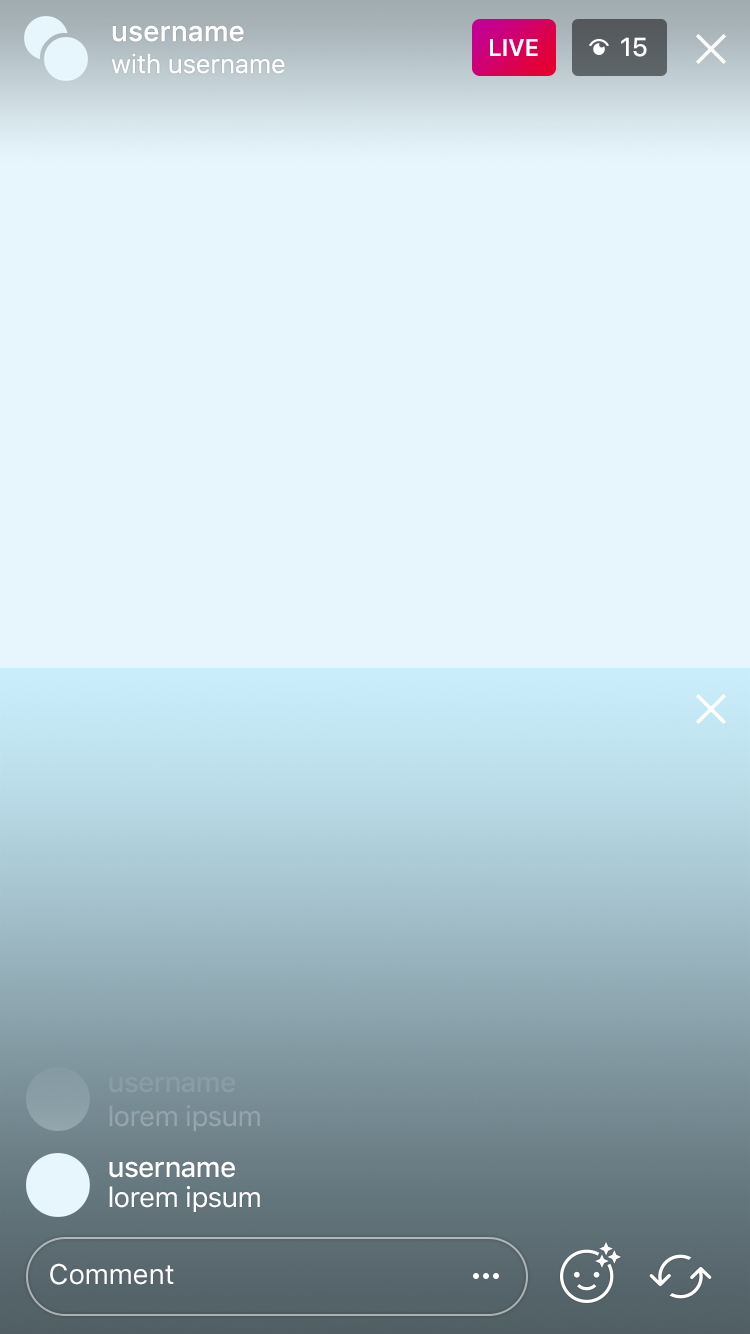
<style>
.page{position:relative;width:750px;height:1334px;background:#e6f6fc}
.page>*{position:absolute;margin:0}
.t1{font:28px "SFUIText-Medium";color:#ffffff}
.t2{font:24px "SFUIText-Semibold";letter-spacing:-0.025em;color:#ffffff}
.t3{font:26px "SFUIText-Medium";letter-spacing:-0.025em;color:#ffffff}
.t4{font:26px "SFUIText-Regular";letter-spacing:-0.015em;color:#ffffff}
.t5{font:28px "SFUIText-Medium";letter-spacing:-0.025em;color:#899da5}
.t6{font:28px "SFUIText-Regular";letter-spacing:-0.025em;color:#95a5ab}
.t7{font:28px "SFUIText-Medium";letter-spacing:-0.025em;color:#ffffff}
.t8{font:28px "SFUIText-Regular";letter-spacing:-0.025em;color:#ffffff}
.t9{font:28px "SFUIText-Regular";letter-spacing:-0.01em;color:#ffffff}
</style>
<div class="page">
<p class="t1" style="left:112px;top:25px;width:132px;height:17px">username</p>
<p class="t2" style="left:490px;top:39px;width:48px;height:17px">LIVE</p>
<p class="t3" style="left:621px;top:37px;width:26px;height:20px">15</p>
<p class="t4" style="left:111px;top:53px;width:174px;height:21px">with username</p>
<p class="t5" style="left:109px;top:1076px;width:126px;height:17px">username</p>
<p class="t6" style="left:109px;top:1105px;width:151px;height:26px">lorem ipsum</p>
<p class="t7" style="left:109px;top:1161px;width:126px;height:17px">username</p>
<p class="t8" style="left:109px;top:1186px;width:151px;height:26px">lorem ipsum</p>
<p class="t9" style="left:50px;top:1263px;width:124px;height:22px">Comment</p>
</div>
